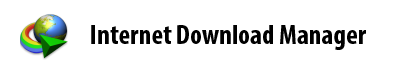
<style>
.page{position:relative;width:400px;height:60px;background:#ffffff}
.page>*{position:absolute;margin:0}
.t1{font:28px "MyriadPro-BoldCond";color:#000000}
</style>
<div class="page">
<p class="t1" style="left:91px;top:25px;width:275px;height:25px">Internet Download Manager</p>
</div>
